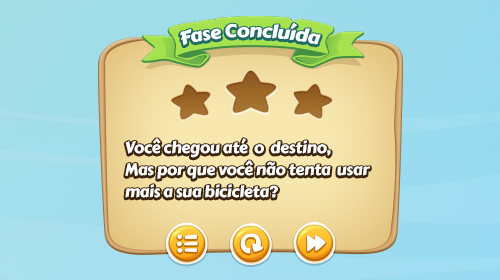
<style>
.page{position:relative;width:500px;height:280px}
.page>*{position:absolute;margin:0}
.t1{font:18.2px "CarterOne";letter-spacing:-0.02em;color:#ffffff;scale:1.05 1}
.t2{font:16px/21.8px "CarterOne";letter-spacing:-0.02em;color:#ffffff}
</style>
<div class="page">
<p class="t1" style="left:180px;top:22px;width:141px;height:24px">Fase Concluída</p>
<p class="t2" style="left:125px;top:138px;width:245px;height:60px">Você chegou até  o  destino,<br>Mas por que você não tenta  usar <br>mais a sua bicicleta?</p>
</div>
